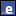
<style>
.page{position:relative;width:16px;height:16px;background:#3b5998}
.page>*{position:absolute;margin:0}
.t1{font:15.4px "Klavika-Bold";letter-spacing:-0.04em;color:#ffffff;scale:1.04 1}
</style>
<div class="page">
<p class="t1" style="left:5px;top:6px;width:8px;height:8px">e</p>
</div>
